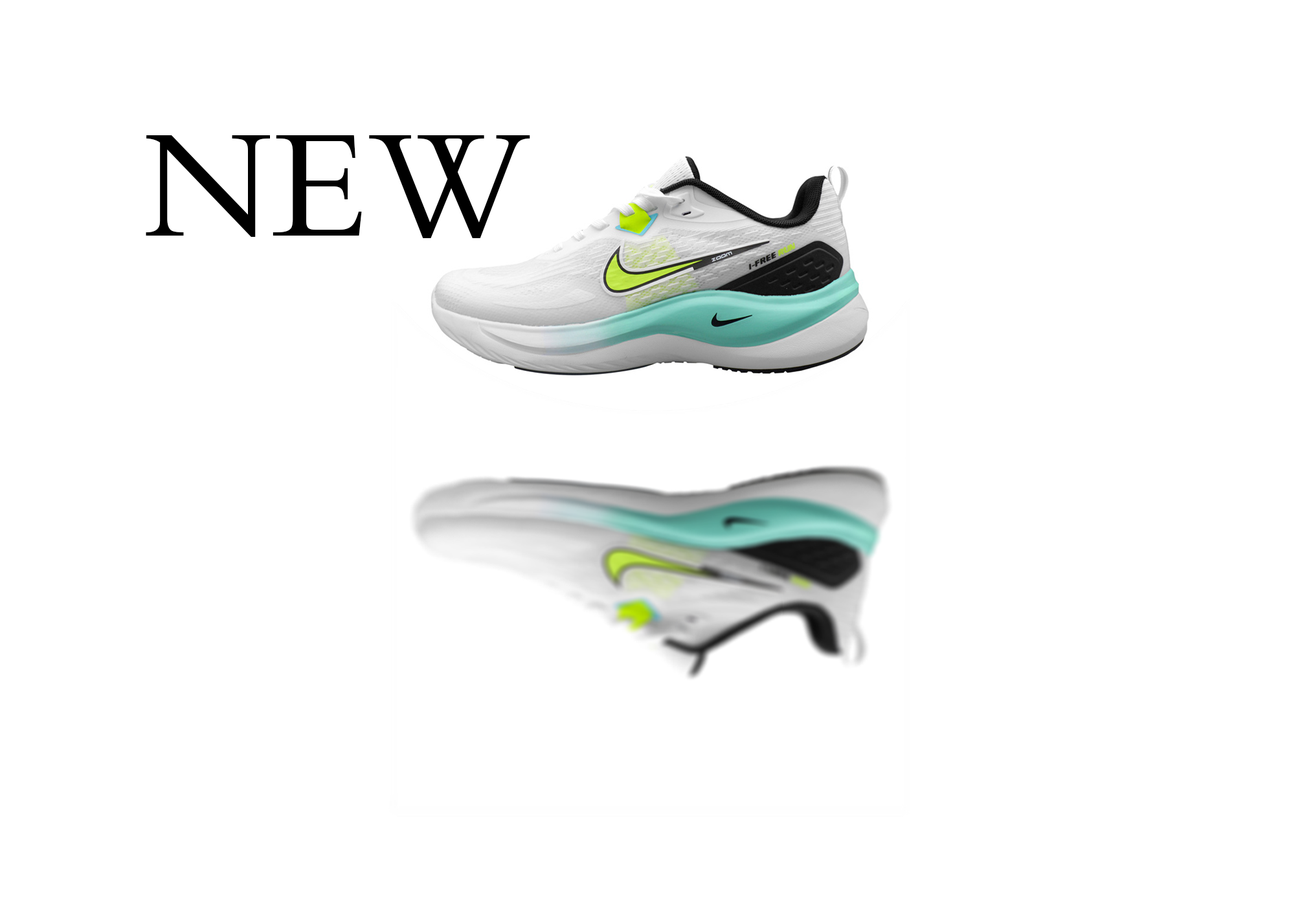
<style>
.page{position:relative;width:1300px;height:917px;background:#ffffff}
.page>*{position:absolute;margin:0}
.t1{font:161.8px "TraditionalArabic";color:#000000}
</style>
<div class="page">
<p class="t1" style="left:146px;top:135px;width:384px;height:103px">NEW</p>
</div>
